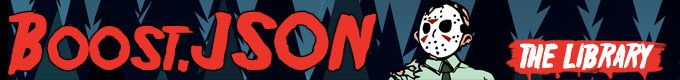
<style>
.page{position:relative;width:680px;height:80px}
.page>*{position:absolute;margin:0}
.t1{font:72px "Friday13";color:#eb342a;font-variant:small-caps}
.t2{font:78px "Friday13";color:#eb342a;font-variant:small-caps}
.t3{font:30px "Friday13";color:#ffffff}
</style>
<div class="page">
<p class="t1" style="left:8px;top:11px;width:369px;height:64px">B<span class="t2">oost</span>.JSON</p>
<p class="t3" style="left:520px;top:43px;width:134px;height:27px">THE LIBRARY</p>
</div>
